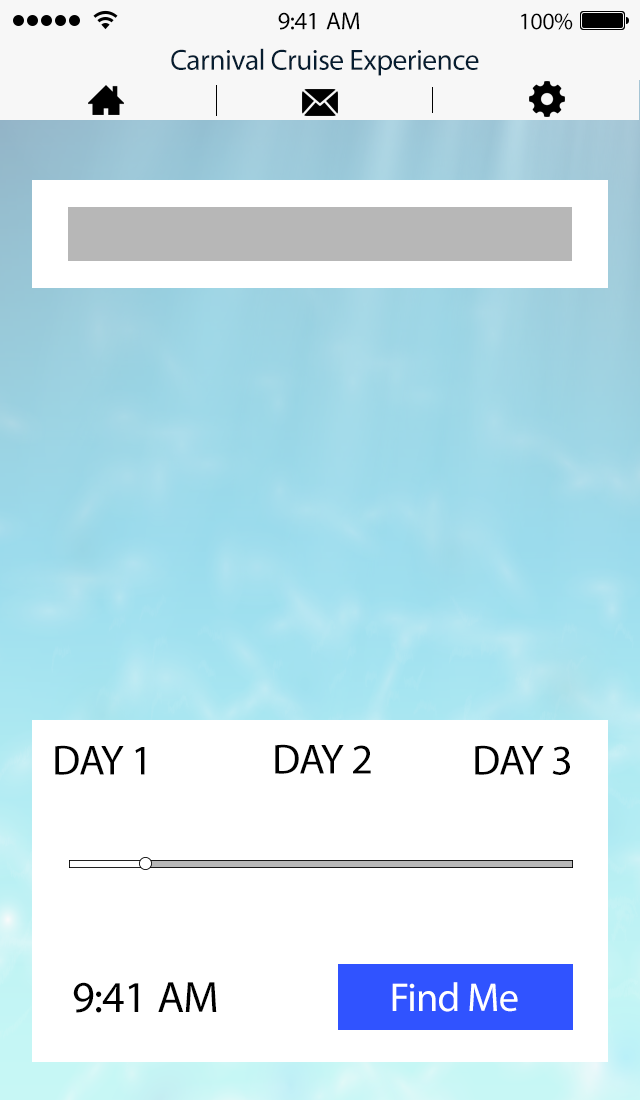
<style>
.page{position:relative;width:640px;height:1100px;background:#ffffff}
.page>*{position:absolute;margin:0}
.t1{font:25px "MyriadPro-Regular";letter-spacing:-0.02em;color:#000000}
.t2{font:24px "MyriadPro-Regular";letter-spacing:-0.02em;color:#000000}
.t3{font:29.4px "MyriadPro-Regular";letter-spacing:-0.02em;color:#061d30}
.t4{font:42.3px "MyriadPro-Regular";letter-spacing:-0.02em;color:#000000}
.t5{font:44.2px "MyriadPro-Regular";letter-spacing:-0.02em;color:#000000}
.t6{font:40.5px "MyriadPro-Regular";letter-spacing:-0.02em;color:#ffffff}
</style>
<div class="page">
<p class="t1" style="left:278px;top:12px;width:82px;height:18px">9:41 AM</p>
<p class="t2" style="left:521px;top:13px;width:52px;height:17px">100%</p>
<p class="t3" style="left:171px;top:48px;width:308px;height:28px">Carnival Cruise Experience</p>
<p class="t4" style="left:55px;top:745px;width:90px;height:30px">DAY 1</p>
<p class="t4" style="left:275px;top:744px;width:96px;height:30px">DAY 2</p>
<p class="t4" style="left:475px;top:745px;width:95px;height:30px">DAY 3</p>
<p class="t5" style="left:73px;top:982px;width:144px;height:31px">9:41 AM</p>
<p class="t6" style="left:392px;top:982px;width:126px;height:30px">Find Me</p>
</div>
